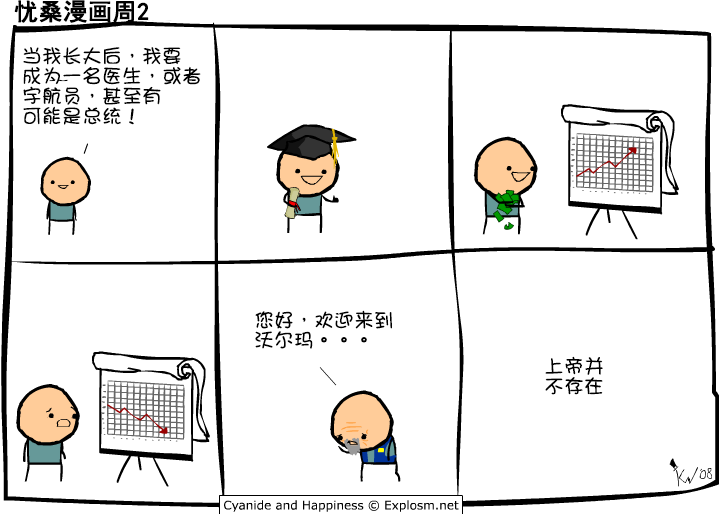
<style>
.page{position:relative;width:719px;height:514px;background:#ffffff}
.page>*{position:absolute;margin:0}
.t1{font:24px "SimHei";color:#000000;font-weight:bold}
.t2{font:20px/20px "DFGirl";color:#000000}
</style>
<div class="page">
<p class="t1" style="left:14px;top:0px;width:135px;height:23px">忧桑漫画周2</p>
<p class="t2" style="left:23px;top:47px;width:178px;height:78px">当我长大后，我要<br>成为一名医生，或者<br>宇航员，甚至有<br>可能是总统！</p>
<p class="t2" style="left:255px;top:310px;width:137px;height:39px">您好，欢迎来到<br>沃尔玛。。。</p>
<p class="t2" style="left:545px;top:356px;width:58px;height:39px">上帝并<br>不存在</p>
</div>
